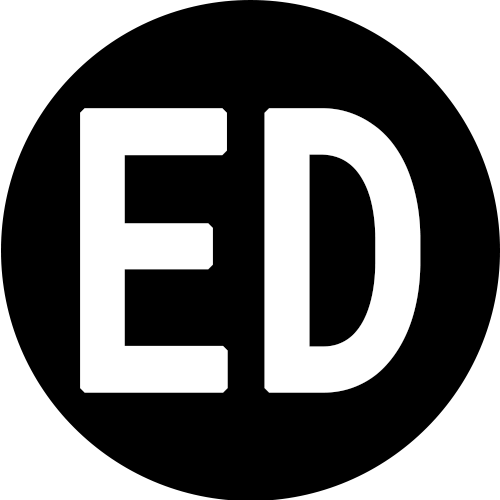
<style>
.page{position:relative;width:500px;height:500px;background:#000000}
.page>*{position:absolute;margin:0}
.t1{font:387px "RobotoMono-Medium";color:#ffffff;font-weight:bold;scale:0.78 1}
</style>
<div class="page">
<p class="t1" style="left:80px;top:108px;width:341px;height:285px">ED</p>
</div>
